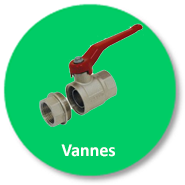
<style>
.page{position:relative;width:185px;height:185px;background:#00cc66}
.page>*{position:absolute;margin:0}
.t1{font:18px "Calibri-Bold";color:#ffffff}
</style>
<div class="page">
<p class="t1" style="left:61px;top:144px;width:54px;height:13px">Vannes</p>
</div>
